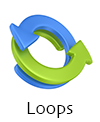
<style>
.page{position:relative;width:100px;height:122px;background:#ffffff}
.page>*{position:absolute;margin:0}
.t1{font:18px "Skia-Regular";color:#000000}
</style>
<div class="page">
<p class="t1" style="left:27px;top:102px;width:46px;height:16px">Loops</p>
</div>
